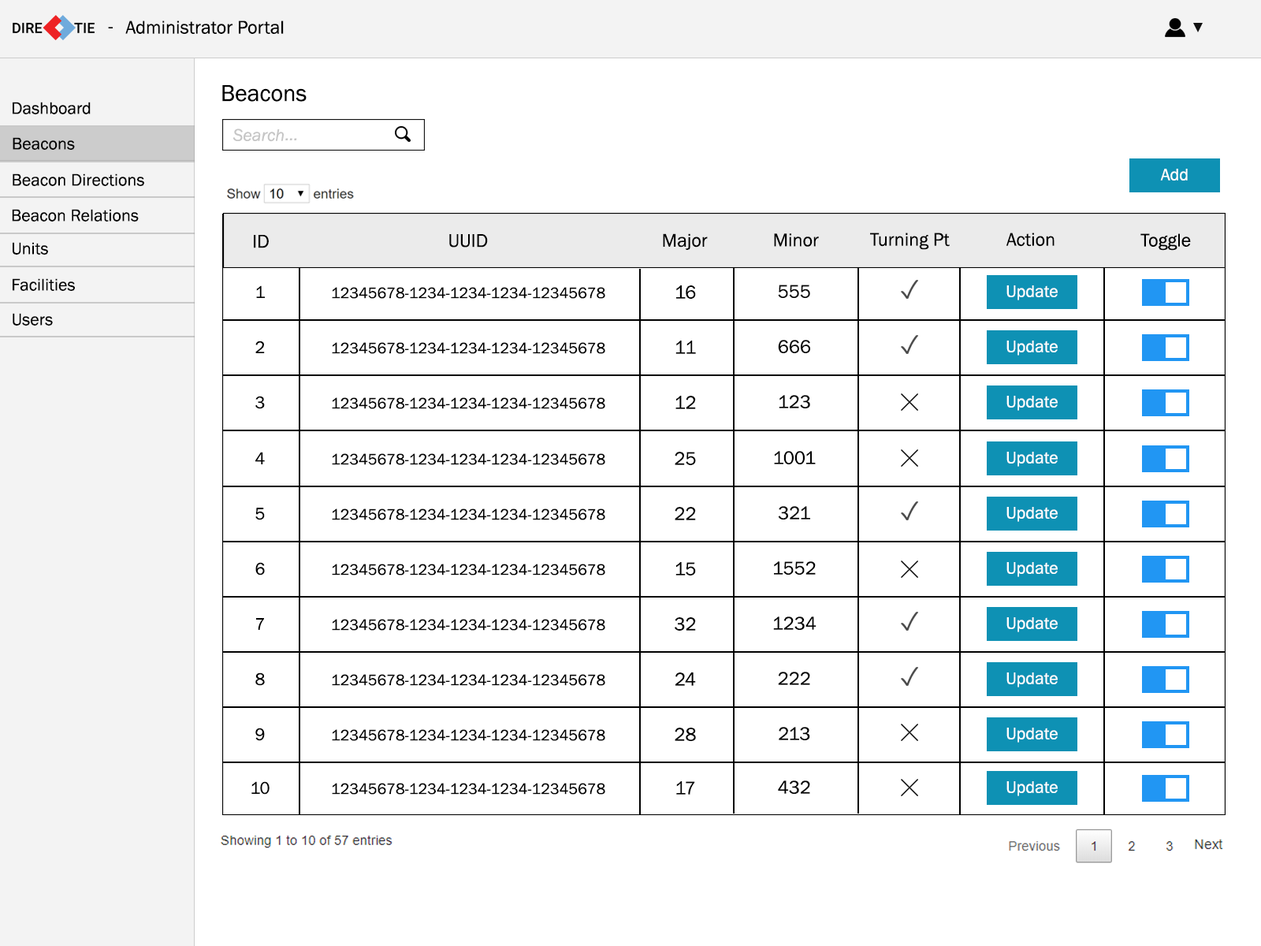
<style>
.page{position:relative;width:1261px;height:946px;background:#ffffff}
.page>*{position:absolute;margin:0}
.t1{font:18.9px "FranklinGothic-Book";color:#000000}
.t2{font:23.6px "FranklinGothic-Book";color:#000000}
.t3{font:17.3px "FranklinGothic-Book";color:#000000}
.t4{font:17.3px "FranklinGothic-Book";color:#ffffff}
.t5{font:15.8px "FranklinGothic-Book";color:#000000}
</style>
<div class="page">
<p class="t1" style="left:108px;top:27px;width:5px;height:1px">-</p>
<p class="t1" style="left:125px;top:20px;width:159px;height:14px">Administrator Portal</p>
<p class="t2" style="left:222px;top:85px;width:85px;height:17px">Beacons</p>
<p class="t3" style="left:13px;top:102px;width:78px;height:12px">Dashboard</p>
<p class="t3" style="left:13px;top:137px;width:62px;height:13px">Beacons</p>
<p class="t3" style="left:13px;top:173px;width:131px;height:13px">Beacon Directions</p>
<p class="t4" style="left:1160px;top:169px;width:28px;height:11px">Add</p>
<p class="t3" style="left:12px;top:209px;width:127px;height:12px">Beacon Relations</p>
<p class="t1" style="left:663px;top:233px;width:45px;height:17px">Major</p>
<p class="t1" style="left:774px;top:233px;width:45px;height:14px">Minor</p>
<p class="t1" style="left:870px;top:232px;width:80px;height:18px">Turning Pt</p>
<p class="t1" style="left:1006px;top:232px;width:48px;height:15px">Action</p>
<p class="t1" style="left:1140px;top:233px;width:51px;height:18px">Toggle</p>
<p class="t3" style="left:13px;top:242px;width:35px;height:13px">Units</p>
<p class="t1" style="left:254px;top:235px;width:15px;height:13px">ID</p>
<p class="t1" style="left:449px;top:234px;width:39px;height:13px">UUID</p>
<p class="t3" style="left:13px;top:278px;width:62px;height:13px">Facilities</p>
<p class="t3" style="left:256px;top:285px;width:9px;height:13px">1</p>
<p class="t5" style="left:332px;top:287px;width:273px;height:12px">12345678-1234-1234-1234-12345678</p>
<p class="t1" style="left:676px;top:285px;width:20px;height:14px">16</p>
<p class="t1" style="left:778px;top:284px;width:32px;height:14px">555</p>
<p class="t4" style="left:1006px;top:285px;width:52px;height:15px">Update</p>
<p class="t3" style="left:13px;top:313px;width:40px;height:12px">Users</p>
<p class="t3" style="left:255px;top:340px;width:10px;height:13px">2</p>
<p class="t1" style="left:675px;top:340px;width:21px;height:14px">11</p>
<p class="t1" style="left:778px;top:340px;width:32px;height:13px">666</p>
<p class="t4" style="left:1006px;top:340px;width:52px;height:15px">Update</p>
<p class="t5" style="left:332px;top:342px;width:273px;height:12px">12345678-1234-1234-1234-12345678</p>
<p class="t3" style="left:255px;top:396px;width:10px;height:13px">3</p>
<p class="t5" style="left:332px;top:397px;width:273px;height:12px">12345678-1234-1234-1234-12345678</p>
<p class="t1" style="left:675px;top:396px;width:21px;height:13px">12</p>
<p class="t1" style="left:779px;top:395px;width:31px;height:13px">123</p>
<p class="t4" style="left:1006px;top:396px;width:52px;height:15px">Update</p>
<p class="t3" style="left:255px;top:452px;width:10px;height:12px">4</p>
<p class="t5" style="left:332px;top:453px;width:273px;height:12px">12345678-1234-1234-1234-12345678</p>
<p class="t1" style="left:675px;top:452px;width:21px;height:13px">25</p>
<p class="t1" style="left:774px;top:451px;width:42px;height:13px">1001</p>
<p class="t4" style="left:1006px;top:452px;width:52px;height:15px">Update</p>
<p class="t3" style="left:255px;top:508px;width:10px;height:12px">5</p>
<p class="t5" style="left:332px;top:508px;width:273px;height:12px">12345678-1234-1234-1234-12345678</p>
<p class="t1" style="left:675px;top:507px;width:21px;height:13px">22</p>
<p class="t1" style="left:778px;top:506px;width:32px;height:13px">321</p>
<p class="t4" style="left:1006px;top:507px;width:52px;height:15px">Update</p>
<p class="t3" style="left:255px;top:562px;width:10px;height:13px">6</p>
<p class="t5" style="left:332px;top:563px;width:273px;height:12px">12345678-1234-1234-1234-12345678</p>
<p class="t1" style="left:675px;top:562px;width:21px;height:13px">15</p>
<p class="t1" style="left:774px;top:561px;width:42px;height:14px">1552</p>
<p class="t4" style="left:1006px;top:562px;width:52px;height:15px">Update</p>
<p class="t3" style="left:256px;top:618px;width:8px;height:12px">7</p>
<p class="t1" style="left:675px;top:617px;width:21px;height:13px">32</p>
<p class="t1" style="left:773px;top:616px;width:43px;height:14px">1234</p>
<p class="t4" style="left:1006px;top:617px;width:52px;height:15px">Update</p>
<p class="t5" style="left:332px;top:619px;width:273px;height:11px">12345678-1234-1234-1234-12345678</p>
<p class="t3" style="left:255px;top:672px;width:10px;height:14px">8</p>
<p class="t5" style="left:332px;top:674px;width:273px;height:12px">12345678-1234-1234-1234-12345678</p>
<p class="t1" style="left:675px;top:672px;width:21px;height:14px">24</p>
<p class="t1" style="left:778px;top:671px;width:32px;height:14px">222</p>
<p class="t4" style="left:1006px;top:672px;width:52px;height:15px">Update</p>
<p class="t3" style="left:255px;top:727px;width:10px;height:14px">9</p>
<p class="t5" style="left:332px;top:729px;width:273px;height:12px">12345678-1234-1234-1234-12345678</p>
<p class="t1" style="left:675px;top:727px;width:21px;height:14px">28</p>
<p class="t1" style="left:779px;top:727px;width:31px;height:13px">213</p>
<p class="t4" style="left:1006px;top:727px;width:52px;height:15px">Update</p>
<p class="t3" style="left:251px;top:781px;width:19px;height:13px">10</p>
<p class="t5" style="left:332px;top:783px;width:273px;height:11px">12345678-1234-1234-1234-12345678</p>
<p class="t1" style="left:676px;top:781px;width:19px;height:13px">17</p>
<p class="t1" style="left:778px;top:780px;width:32px;height:14px">432</p>
<p class="t4" style="left:1006px;top:781px;width:52px;height:15px">Update</p>
</div>
